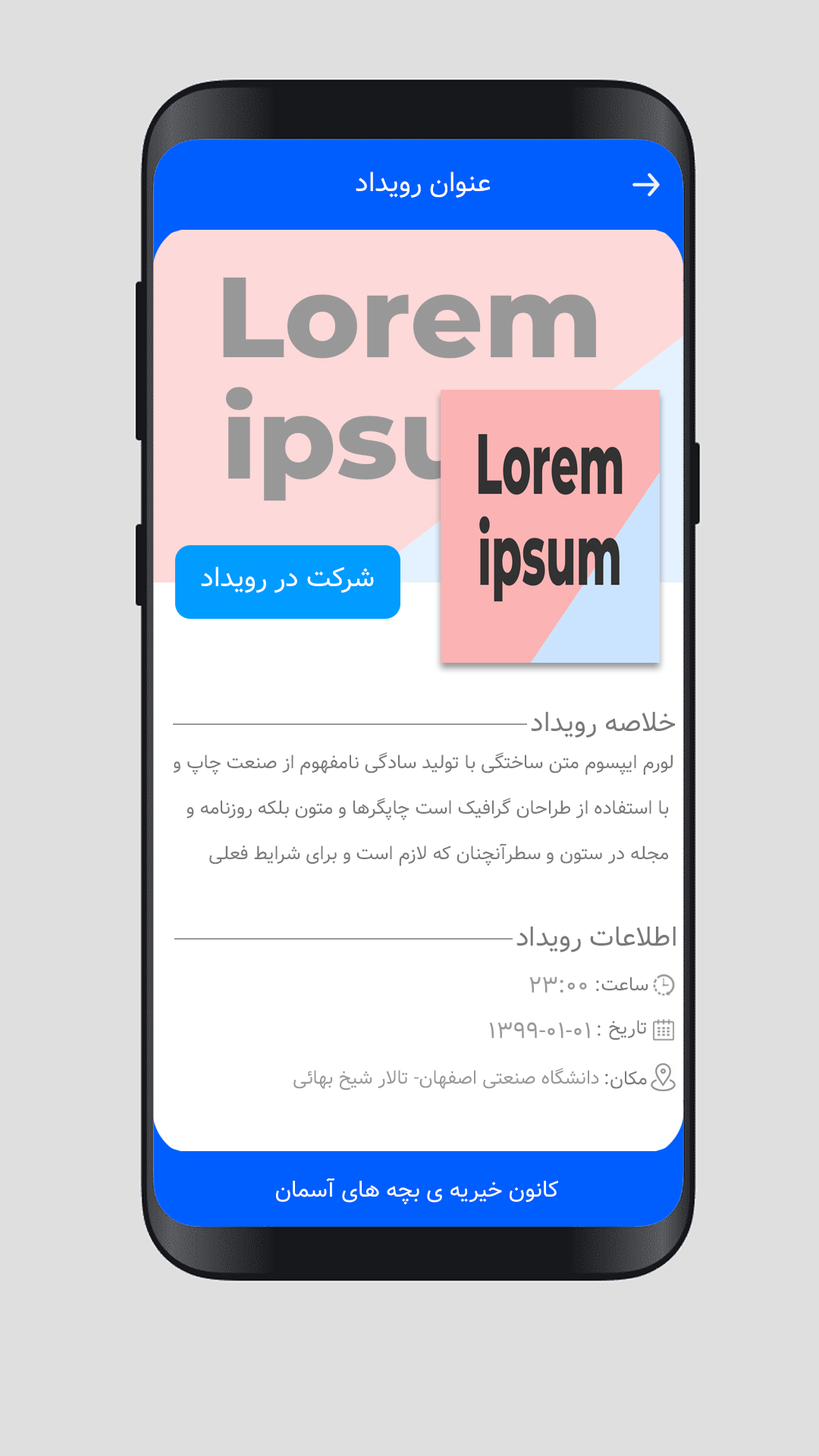
<style>
.page{position:relative;width:819px;height:1456px;background:#dfdfdf}
.page>*{position:absolute;margin:0}
.t1{font:27.3px "Vazir";color:#ffffff}
.t2{font:27.3px "Vazir";color:#797979}
.t3{font:19px/45.5px "Vazir";color:#797979}
.t4{font:19px "Vazir";color:#797979}
.t5{font:19px "Vazir";color:#989898}
.t6{font:22.7px "Vazir";color:#ffffff}
</style>
<div class="page">
<p class="t1" style="left:356px;top:171px;width:134px;height:27px">عنوان رویداد</p>
<p class="t1" style="left:201px;top:566px;width:173px;height:27px">شرکت در رویداد</p>
<p class="t2" style="left:531px;top:711px;width:144px;height:27px">خلاصه رویداد</p>
<p class="t3" style="left:173px;top:752px;width:500px;height:114px;text-align:right">لورم ایپسوم متن ساختگی با تولید سادگی نامفهوم از صنعت چاپ و<br> با استفاده از طراحان گرافیک است چاپگرها و متون بلکه روزنامه و <br>مجله در ستون و سطرآنچنان که لازم است و برای شرایط فعلی</p>
<p class="t2" style="left:516px;top:926px;width:160px;height:26px">اطلاعات رویداد</p>
<p class="t4" style="left:601px;top:977px;width:47px;height:13px">ساعت</p>
<p class="t4" style="left:596px;top:981px;width:3px;height:10px">:</p>
<p class="t4" style="left:598px;top:1025px;width:3px;height:11px">:</p>
<p class="t4" style="left:609px;top:1020px;width:38px;height:20px">تاریخ</p>
<p class="t5" style="left:293px;top:1068px;width:306px;height:22px">دانشگاه صنعتی اصفهان- تالار شیخ بهائی</p>
<p class="t4" style="left:605px;top:1071px;width:42px;height:18px">:مکان</p>
<p class="t6" style="left:276px;top:1178px;width:282px;height:27px">کانون خیریه ی بچه های آسمان</p>
</div>
